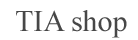
<style>
.page{position:relative;width:138px;height:40px;background:#ffffff}
.page>*{position:absolute;margin:0}
.t1{font:30px "TimesNewRomanPSMT";color:#474747}
</style>
<div class="page">
<p class="t1" style="left:16px;top:10px;width:111px;height:28px">TIA shop</p>
</div>
